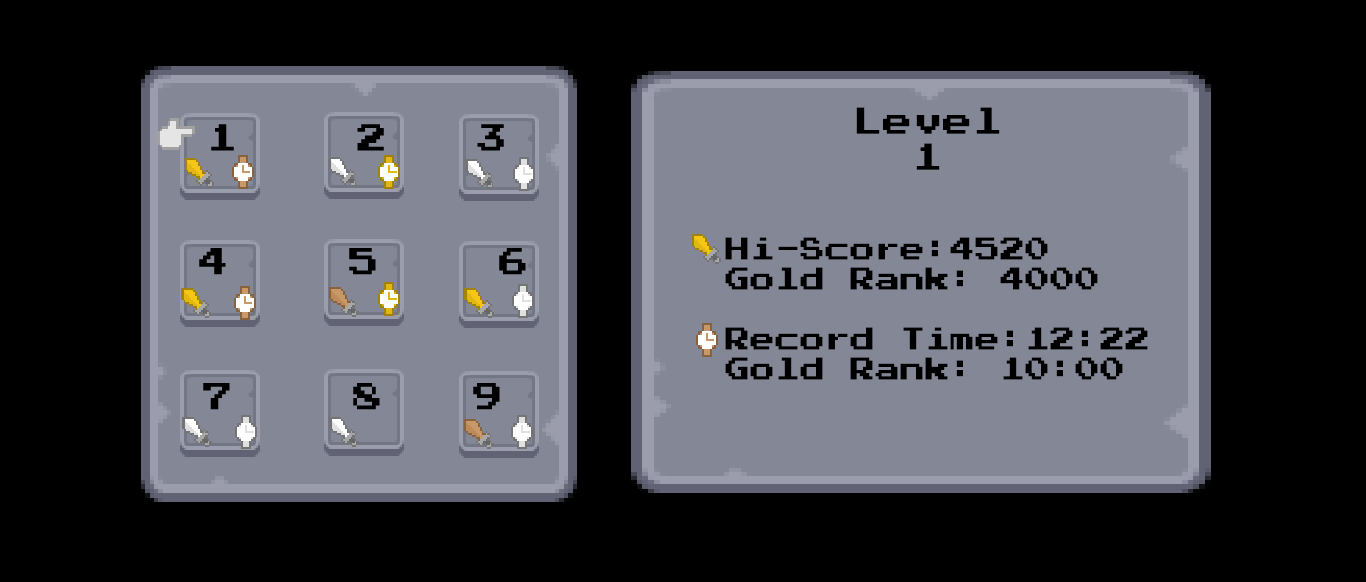
<style>
.page{position:relative;width:1366px;height:582px;background:#000000}
.page>*{position:absolute;margin:0}
.t1{font:30px "PressStart2P";color:#000000}
.t2{font:25px "PressStart2P";color:#000000}
</style>
<div class="page">
<p class="t1" style="left:856px;top:107px;width:144px;height:63px">Level<br>     1</p>
<p class="t2" style="left:725px;top:237px;width:423px;height:143px">Hi-Score:4520<br>Gold Rank: 4000<br><br>Record Time:12:22<br>Gold Rank: 10:00</p>
</div>
